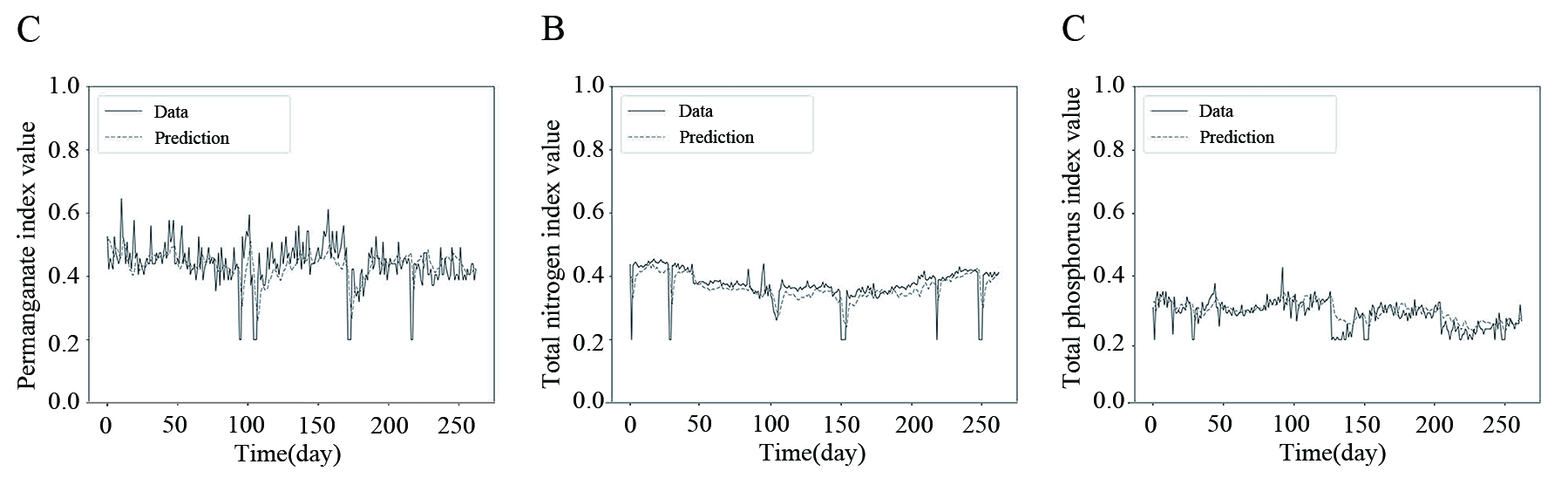
<style>
.page{position:relative;width:1568px;height:478px;background:#ffffff}
.page>*{position:absolute;margin:0}
.t1{font:36.3px "TimesNewRomanPSMT";color:#040606}
.t2{font:25.4px "TimesNewRomanPSMT";color:#040606}
.t3{font:18.2px "TimesNewRomanPSMT";color:#040606}
</style>
<div class="page">
<p class="t1" style="left:17px;top:16px;width:23px;height:26px">C</p>
<p class="t1" style="left:541px;top:16px;width:23px;height:24px">B</p>
<p class="t1" style="left:1062px;top:15px;width:23px;height:26px">C</p>
<p class="t2" style="left:51px;top:77px;width:28px;height:16px">1.0</p>
<p class="t2" style="left:575px;top:76px;width:29px;height:16px">1.0</p>
<p class="t2" style="left:1096px;top:76px;width:28px;height:16px">1.0</p>
<p class="t2" style="left:1062px;top:88px;width:23px;height:301px;rotate:180deg">Total phosphorus index value</p>
<p class="t3" style="left:154px;top:105px;width:35px;height:13px">Data</p>
<p class="t3" style="left:679px;top:105px;width:35px;height:12px">Data</p>
<p class="t3" style="left:1199px;top:105px;width:35px;height:12px">Data</p>
<p class="t2" style="left:17px;top:122px;width:23px;height:268px;rotate:180deg">Permanganate index value</p>
<p class="t2" style="left:541px;top:120px;width:24px;height:269px;rotate:180deg">Total nitrogen index value</p>
<p class="t3" style="left:155px;top:131px;width:75px;height:13px">Prediction</p>
<p class="t3" style="left:680px;top:130px;width:75px;height:13px">Prediction</p>
<p class="t3" style="left:1200px;top:130px;width:75px;height:13px">Prediction</p>
<p class="t2" style="left:49px;top:141px;width:29px;height:17px">0.8</p>
<p class="t2" style="left:574px;top:140px;width:29px;height:17px">0.8</p>
<p class="t2" style="left:1094px;top:140px;width:29px;height:17px">0.8</p>
<p class="t2" style="left:49px;top:203px;width:30px;height:17px">0.6</p>
<p class="t2" style="left:574px;top:202px;width:30px;height:17px">0.6</p>
<p class="t2" style="left:1094px;top:202px;width:30px;height:17px">0.6</p>
<p class="t2" style="left:49px;top:267px;width:30px;height:16px">0.4</p>
<p class="t2" style="left:574px;top:266px;width:30px;height:16px">0.4</p>
<p class="t2" style="left:1094px;top:266px;width:30px;height:16px">0.4</p>
<p class="t2" style="left:49px;top:335px;width:30px;height:16px">0.2</p>
<p class="t2" style="left:574px;top:334px;width:30px;height:16px">0.2</p>
<p class="t2" style="left:1094px;top:334px;width:30px;height:16px">0.2</p>
<p class="t2" style="left:49px;top:392px;width:30px;height:17px">0.0</p>
<p class="t2" style="left:574px;top:391px;width:30px;height:17px">0.0</p>
<p class="t2" style="left:1094px;top:391px;width:30px;height:17px">0.0</p>
<p class="t2" style="left:100px;top:417px;width:12px;height:16px">0</p>
<p class="t2" style="left:163px;top:416px;width:24px;height:16px">50</p>
<p class="t2" style="left:230px;top:416px;width:34px;height:16px">100</p>
<p class="t2" style="left:301px;top:417px;width:34px;height:16px">150</p>
<p class="t2" style="left:370px;top:417px;width:38px;height:16px">200</p>
<p class="t2" style="left:438px;top:417px;width:37px;height:16px">250</p>
<p class="t2" style="left:625px;top:416px;width:11px;height:16px">0</p>
<p class="t2" style="left:688px;top:415px;width:23px;height:16px">50</p>
<p class="t2" style="left:755px;top:415px;width:34px;height:16px">100</p>
<p class="t2" style="left:825px;top:416px;width:34px;height:16px">150</p>
<p class="t2" style="left:895px;top:416px;width:38px;height:16px">200</p>
<p class="t2" style="left:962px;top:416px;width:38px;height:16px">250</p>
<p class="t2" style="left:1145px;top:416px;width:12px;height:16px">0</p>
<p class="t2" style="left:1208px;top:415px;width:24px;height:16px">50</p>
<p class="t2" style="left:1275px;top:415px;width:34px;height:16px">100</p>
<p class="t2" style="left:1346px;top:416px;width:34px;height:16px">150</p>
<p class="t2" style="left:1415px;top:416px;width:38px;height:16px">200</p>
<p class="t2" style="left:1483px;top:416px;width:37px;height:16px">250</p>
<p class="t2" style="left:234px;top:444px;width:107px;height:22px">Time(day)</p>
<p class="t2" style="left:759px;top:443px;width:106px;height:22px">Time(day)</p>
<p class="t2" style="left:1280px;top:443px;width:106px;height:22px">Time(day)</p>
</div>
